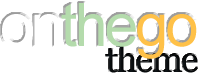
<style>
.page{position:relative;width:198px;height:73px;background:#ffffff}
.page>*{position:absolute;margin:0}
.t1{font:60px "ArialMT";letter-spacing:-0.05em;color:#b4dbac}
.t2{font:60px "ArialMT";letter-spacing:-0.05em;color:#ffffff}
.t3{font:60px "ArialMT";letter-spacing:-0.05em;color:#ffc148}
.t4{font:36px "Georgia";letter-spacing:-0.05em;color:#151c20}
</style>
<div class="page">
<p class="t1" style="left:2px;top:3px;width:195px;height:56px"><span class="t2">on</span>the<span class="t3">go</span></p>
<p class="t4" style="left:106px;top:44px;width:92px;height:29px">theme</p>
</div>
